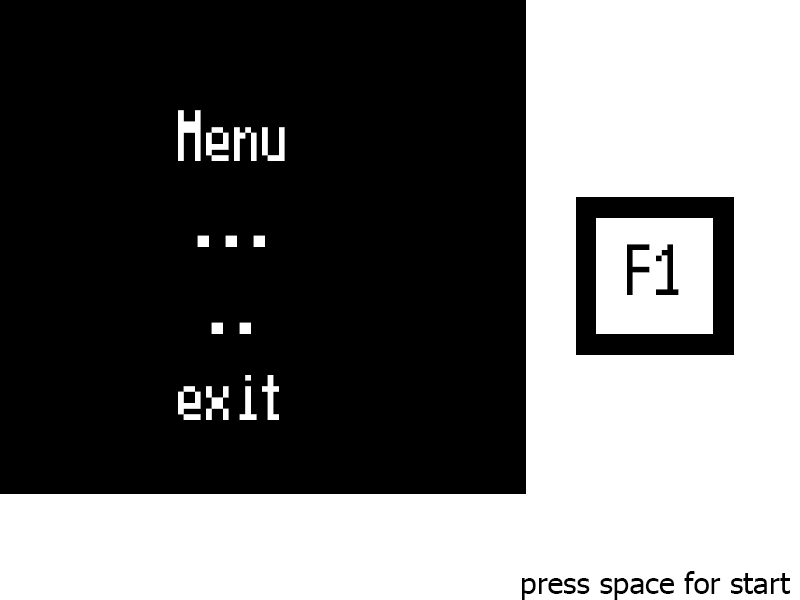
<style>
.page{position:relative;width:800px;height:600px;background:#000000}
.page>*{position:absolute;margin:0}
.t1{font:72px "Terminal";color:#ffffff}
.t2{font:72px "Terminal";color:#000000}
.t3{font:30px "Tahoma";color:#000000}
</style>
<div class="page">
<p class="t1" style="left:178px;top:110px;width:107px;height:310px;text-align:center">Menu<br>...<br>..<br>exit</p>
<p class="t2" style="left:627px;top:244px;width:52px;height:51px">F1</p>
<p class="t3" style="left:522px;top:571px;width:268px;height:29px">press space for start</p>
</div>
